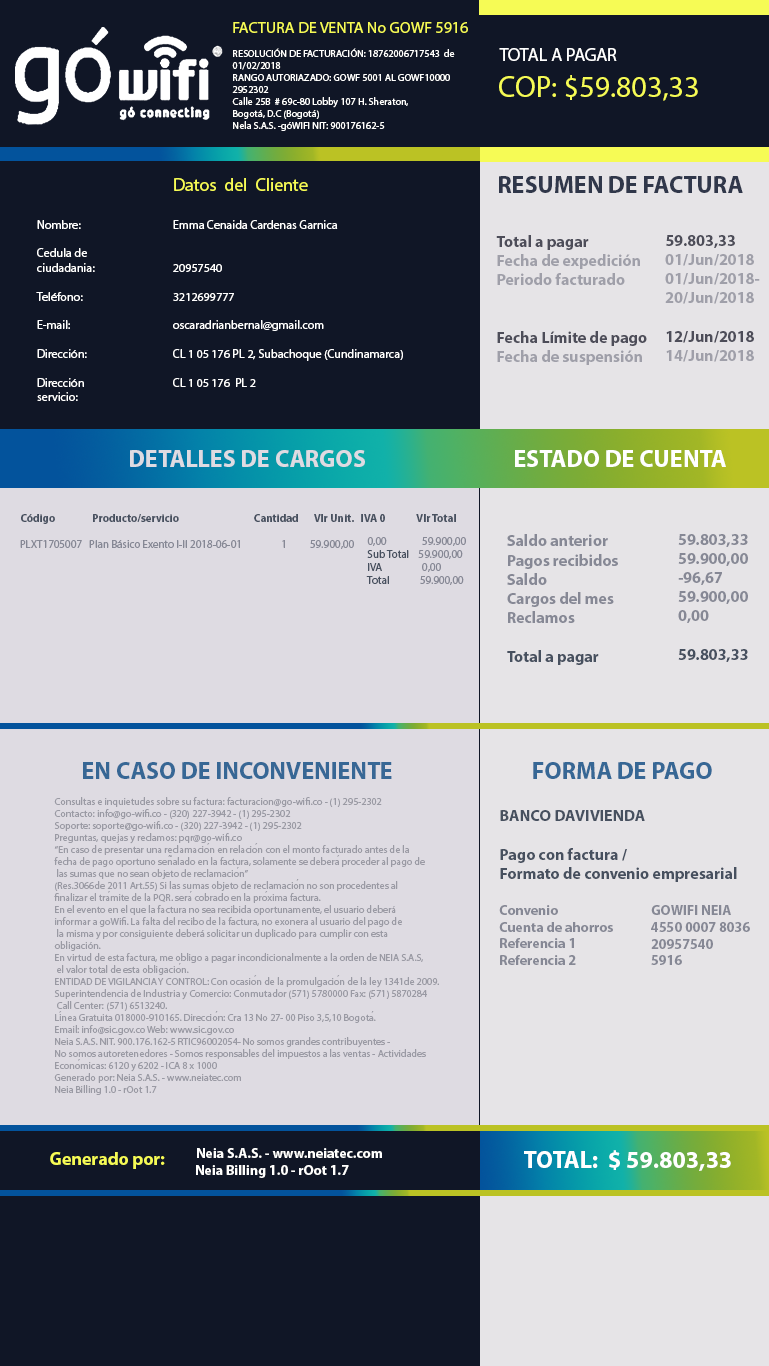
<style>
.page{position:relative;width:769px;height:1366px;background:#101626}
.page>*{position:absolute;margin:0}
.t1{font:16px "MyriadPro-Regular";color:#f6fb55}
.t2{font:10px "MyriadPro-Regular";color:#fffffe}
.t3{font:18px "MyriadPro-Regular";color:#ffffff}
.t4{font:30px "MyriadPro-Regular";color:#f6fb55}
.t5{font:18px "MyriadPro-Regular";color:#f6fb55}
.t6{font:24px "MyriadPro-Bold";color:#30374a}
.t7{font:12px "MyriadPro-Regular";color:#ffffff}
.t8{font:16px "MyriadPro-Bold";color:#9f9fa9}
.t9{font:16px "MyriadPro-Bold";color:#4d4d59}
.t10{font:24px "MyriadPro-Bold";color:#dedbe2}
.t11{font:24px "MyriadPro-Bold";color:#ffffff}
.t12{font:11px "MyriadPro-Bold";color:#47505f}
.t13{font:16px "MyriadPro-Bold";color:#868895}
.t14{font:16px "MyriadPro-Bold";color:#47505f}
.t15{font:11px "MyriadPro-Regular";color:#868895}
.t16{font:11px "MyriadPro-Regular";color:#47505f}
.t17{font:24px "MyriadPro-Bold";color:#376795}
.t18{font:10px "MyriadPro-Regular";color:#9a9aa4}
.t19{font:10px "TimesNewRomanPSMT";color:#9a9aa4}
.t20{font:14px "MyriadPro-Bold";color:#868895}
.t21{font:18px "MyriadPro-Bold";color:#f6fb55}
.t22{font:14px "MyriadPro-Bold";color:#fffffe}
</style>
<div class="page">
<p class="t1" style="left:233px;top:22px;width:235px;height:11px">FACTURA DE VENTA No GOWF 5916</p>
<p class="t2" style="left:232px;top:48px;width:223px;height:83px">RESOLUCIÓN DE FACTURACIÓN: 18762006717543  de<br>01/02/2018<br>RANGO AUTORIAZADO: GOWF 5001 AL GOWF10000<br>2952302<br>Calle 25B  # 69c-80 Lobby 107 H. Sheraton, <br>Bogotá, D.C (Bogotá)<br>Nela S.A.S. -góWIFI NIT: 900176162-5</p>
<p class="t3" style="left:499px;top:48px;width:118px;height:13px">TOTAL A PAGAR</p>
<p class="t4" style="left:499px;top:75px;width:199px;height:26px">COP: $59.803,33</p>
<p class="t5" style="left:174px;top:178px;width:134px;height:13px">Datos  del  Cliente</p>
<p class="t6" style="left:499px;top:176px;width:244px;height:17px">RESUMEN DE FACTURA</p>
<p class="t7" style="left:36px;top:220px;width:59px;height:181px">Nombre: <br><br>Cedula de <br>ciudadania:<br><br>Teléfono:<br><br>E-mail:<br><br>Dirección:<br><br>Dirección <br>servicio:</p>
<p class="t7" style="left:173px;top:220px;width:230px;height:167px">Emma Cenaida Cardenas Garnica<br><br><br>20957540<br><br>3212699777<br><br>oscaradrianbernal@gmail.com<br><br>CL 1 05 176 PL 2, Subachoque (Cundinamarca)<br><br>CL 1 05 176  PL 2</p>
<p class="t8" style="left:496px;top:235px;width:151px;height:130px"><span class="t9">Total a pagar<br></span>Fecha de expedición<br>Periodo facturado<br><br><br><span class="t9">Fecha Límite de pago<br></span>Fecha de suspensión</p>
<p class="t8" style="left:665px;top:235px;width:95px;height:127px"><span class="t9">59.803,33<br></span>01/Jun/2018<br>01/Jun/2018-<br>20/Jun/2018<br><br><span class="t9">12/Jun/2018<br></span>14/Jun/2018</p>
<p class="t10" style="left:130px;top:450px;width:235px;height:17px">DETALLES DE CARGOS</p>
<p class="t11" style="left:515px;top:450px;width:211px;height:17px">ESTADO DE CUENTA</p>
<p class="t12" style="left:21px;top:514px;width:435px;height:10px">Código  Producto/servicio            Cantidad       Vlr Unit.   IVA 0  Vlr Total</p>
<p class="t13" style="left:507px;top:534px;width:111px;height:131px">Saldo anterior<br>Pagos recibidos<br>Saldo<br>Cargos del mes<br>Reclamos<br><br><span class="t14">Total a pagar</span></p>
<p class="t13" style="left:678px;top:534px;width:70px;height:128px">59.803,33<br>59.900,00<br>-96,67<br>59.900,00<br>0,00<br><br><span class="t14">59.803,33</span></p>
<p class="t15" style="left:20px;top:540px;width:334px;height:9px">PLXT1705007   Plan Básico Exento I-II 2018-06-01      1   59.900,00</p>
<p class="t15" style="left:366px;top:537px;width:100px;height:48px">0,00         59.900,00<br><span class="t16">Sub Total   </span> 59.900,00<br><span class="t16">IVA        </span> 0,00<br><span class="t16">Total        </span>59.900,00</p>
<p class="t17" style="left:83px;top:762px;width:309px;height:17px">EN CASO DE INCONVENIENTE</p>
<p class="t17" style="left:533px;top:762px;width:179px;height:17px">FORMA DE PAGO</p>
<p class="t18" style="left:54px;top:797px;width:385px;height:298px">Consultas e inquietudes sobre su factura: facturacion@go-wifi.co - (1) 295-2302<br>Contacto: info@go-wifi.co - (320) 227-3942 - (1) 295-2302<br>Soporte: soporte@go-wifi.co - (320) 227-3942 - (1) 295-2302<br>Preguntas, quejas y reclamos: pqr@go-wifi.co<br>“En caso de presentar una reclamacio<span class="t19">́</span>n en relacio<span class="t19">́</span>n con el monto facturado antes de la <br>fecha de pago oportuno sen<span class="t19">̃</span>alado en la factura, solamente se debera<span class="t19">́</span> proceder al pago de<br> las sumas que no sean objeto de reclamacio<span class="t19">́</span>n”<br>(Res.3066de 2011 Art.55) Si las sumas objeto de reclamacio<span class="t19">́</span>n no son procedentes al <br>finalizar el tra<span class="t19">́</span>mite de la PQR. sera<span class="t19">́</span> cobrado en la pro<span class="t19">́</span>xima factura.<br>En el evento en el que la factura no sea recibida oportunamente, el usuario deberá <br>informar a goWifi. La falta del recibo de la factura, no exonera al usuario del pago de<br> la misma y por consiguiente deberá solicitar un duplicado para cumplir con esta <br>obligación.<br>En virtud de esta factura, me obligo a pagar incondicionalmente a la orden de NEIA S.A.S,<br> el valor total de esta obligacio<span class="t19">́</span>n.<br>ENTIDAD DE VIGILANCIA Y CONTROL: Con ocasio<span class="t19">́</span>n de la promulgacio<span class="t19">́</span>n de la ley 1341de 2009. <br>Superintendencia de Industria y Comercio: Conmutador (571) 5780000 Fax: (571) 5870284<br> Call Center: (571) 6513240.<br>Li<span class="t19">́</span>nea Gratuita 018000-910165. Direccio<span class="t19">́</span>n: Cra 13 No 27- 00 Piso 3,5,10 Bogota<span class="t19">́</span>. <br>Email: info@sic.gov.co Web: www.sic.gov.co<br>Neia S.A.S. NIT. 900.176.162-5 RTIC96002054- No somos grandes contribuyentes - <br>No somos autoretenedores - Somos responsables del impuestos a las ventas - Actividades <br>Econo<span class="t19">́</span>micas: 6120 y 6202 - ICA 8 x 1000<br>Generado por: Neia S.A.S. - www.neiatec.com<br>Neia Billing 1.0 - rOot 1.7</p>
<p class="t14" style="left:499px;top:810px;width:238px;height:155px">BANCO DAVIVIENDA<br><br>Pago con factura / <br>Formato de convenio empresarial<br><br><span class="t20">Convenio<br>Cuenta de ahorros<br>Referencia 1<br>Referencia 2</span></p>
<p class="t20" style="left:651px;top:905px;width:99px;height:60px">GOWIFI NEIA<br>4550 0007 8036<br>20957540<br>5916</p>
<p class="t21" style="left:50px;top:1152px;width:115px;height:17px">Generado por:</p>
<p class="t22" style="left:196px;top:1148px;width:186px;height:30px"><span class="t21"> </span>Neia S.A.S. - www.neiatec.com<br> Neia Billing 1.0 - rOot 1.7</p>
<p class="t11" style="left:524px;top:1150px;width:207px;height:21px">TOTAL:  $ 59.803,33</p>
</div>
